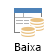
<style>
.page{position:relative;width:56px;height:56px;background:#ffffff}
.page>*{position:absolute;margin:0}
.t1{font:11px "SegoeUI";letter-spacing:0.001em;color:#000000;scale:1.08 1}
</style>
<div class="page">
<p class="t1" style="left:15px;top:43px;width:26px;height:8px">Baixa</p>
</div>
